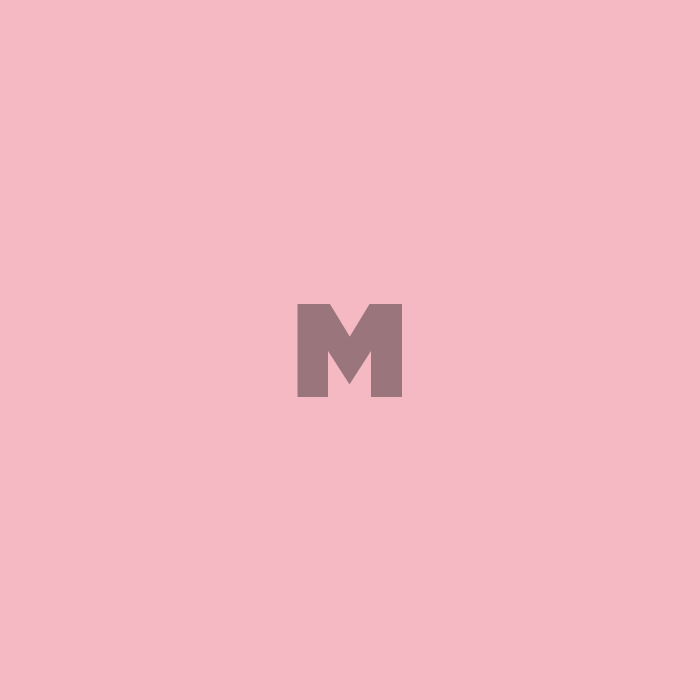
<style>
.page{position:relative;width:700px;height:700px;background:#f4b9c2}
.page>*{position:absolute;margin:0}
.t1{font:133.2px "Gotham-Ultra";letter-spacing:0.52em;color:#9a757b}
</style>
<div class="page">
<p class="t1" style="left:297px;top:304px;width:105px;height:93px">M</p>
</div>
